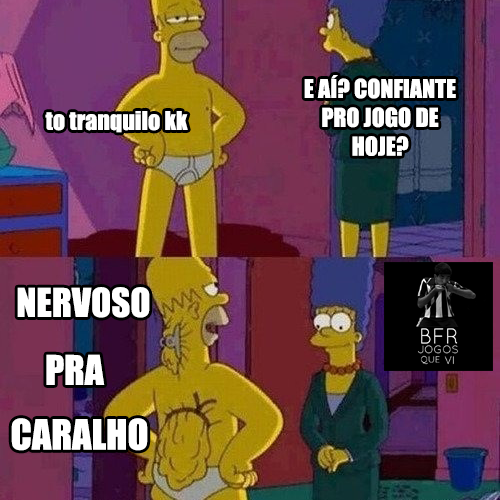
<style>
.page{position:relative;width:500px;height:500px}
.page>*{position:absolute;margin:0}
.t1{font:24px "Impact";color:#ffffff}
.t2{font:36.6px "Impact";color:#ffffff}
.t3{font:37.9px "Impact";color:#ffffff}
.t4{font:38.6px "Impact";color:#ffffff}
</style>
<div class="page">
<p class="t1" style="left:304px;top:75px;width:152px;height:81px;text-align:center">E AÍ? CONFIANTE<br>PRO JOGO DE HOJE?</p>
<p class="t1" style="left:45px;top:111px;width:143px;height:22px">to tranquilo kk</p>
<p class="t2" style="left:17px;top:287px;width:133px;height:31px">NERVOSO</p>
<p class="t3" style="left:46px;top:354px;width:59px;height:31px">PRA</p>
<p class="t4" style="left:11px;top:418px;width:137px;height:33px">CARALHO</p>
</div>
